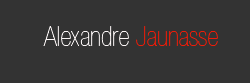
<style>
.page{position:relative;width:250px;height:83px;background:#333333}
.page>*{position:absolute;margin:0}
.t1{font:27.7px "HelveticaNeue-UltraLigCond";color:#fbf6f6}
.t2{font:27.7px "HelveticaNeue-UltraLigCond";color:#ef1b07}
</style>
<div class="page">
<p class="t1" style="left:43px;top:26px;width:175px;height:20px">Alexandre <span class="t2">Jaunasse</span></p>
</div>
